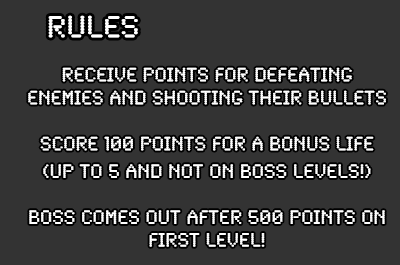
<style>
.page{position:relative;width:400px;height:265px;background:#333333}
.page>*{position:absolute;margin:0}
.t1{font:32px "SynchroLET";color:#ffffff}
.t2{font:20px/4.6px "SynchroLET";color:#ffffff}
</style>
<div class="page">
<p class="t1" style="left:48px;top:15px;width:90px;height:23px">RULES</p>
<p class="t2" style="left:28px;top:67px;width:358px;height:180px;text-align:center">Receive points for defeating <br><br><br><br><br>enemies and shooting their bullets<br><br><br><br><br><br><br><br><br><br>SCORE 100 points for a bonus life<br><br><br><br><br><br>(UP TO 5 and not on boss levels!)<br><br><br><br><br><br><br><br><br><br>BOSS COMES OUT AFTER 500 points on <br><br><br><br><br>first level!</p>
</div>
